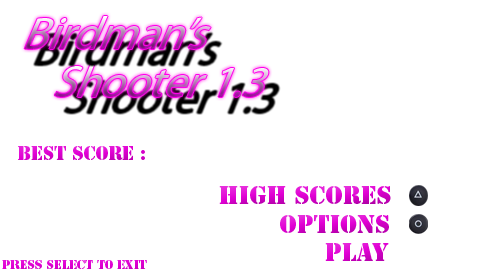
<style>
.page{position:relative;width:480px;height:272px;background:#ffffff}
.page>*{position:absolute;margin:0}
.t1{font:18px "StencilStd";color:#e101d4}
.t2{font:24px "StencilStd"}
.t3{font:12px "StencilStd";color:#e000d3}
</style>
<div class="page">
<p class="t1" style="left:18px;top:146px;width:127px;height:14px">Best Score :</p>
<p class="t2" style="left:219px;top:186px;width:172px;height:18px">High Scores</p>
<p class="t2" style="left:280px;top:215px;width:109px;height:18px">options</p>
<p class="t2" style="left:325px;top:243px;width:64px;height:18px">Play</p>
<p class="t3" style="left:2px;top:260px;width:145px;height:9px">Press SELECT To Exit</p>
</div>
